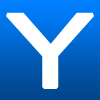
<style>
.page{position:relative;width:100px;height:100px}
.page>*{position:absolute;margin:0}
.t1{font:140px "BankGothic-Light";color:#ffffff;font-weight:bold}
</style>
<div class="page">
<p class="t1" style="left:6px;top:12px;width:88px;height:77px">Y</p>
</div>
